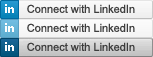
<style>
.page{position:relative;width:153px;height:57px}
.page>*{position:absolute;margin:0}
.t1{font:11px "ArialMT";color:#3d3d3d}
</style>
<div class="page">
<p class="t1" style="left:27px;top:4px;width:108px;height:9px">Connect with LinkedIn</p>
<p class="t1" style="left:27px;top:23px;width:108px;height:9px">Connect with LinkedIn</p>
<p class="t1" style="left:27px;top:42px;width:108px;height:9px">Connect with LinkedIn</p>
</div>
